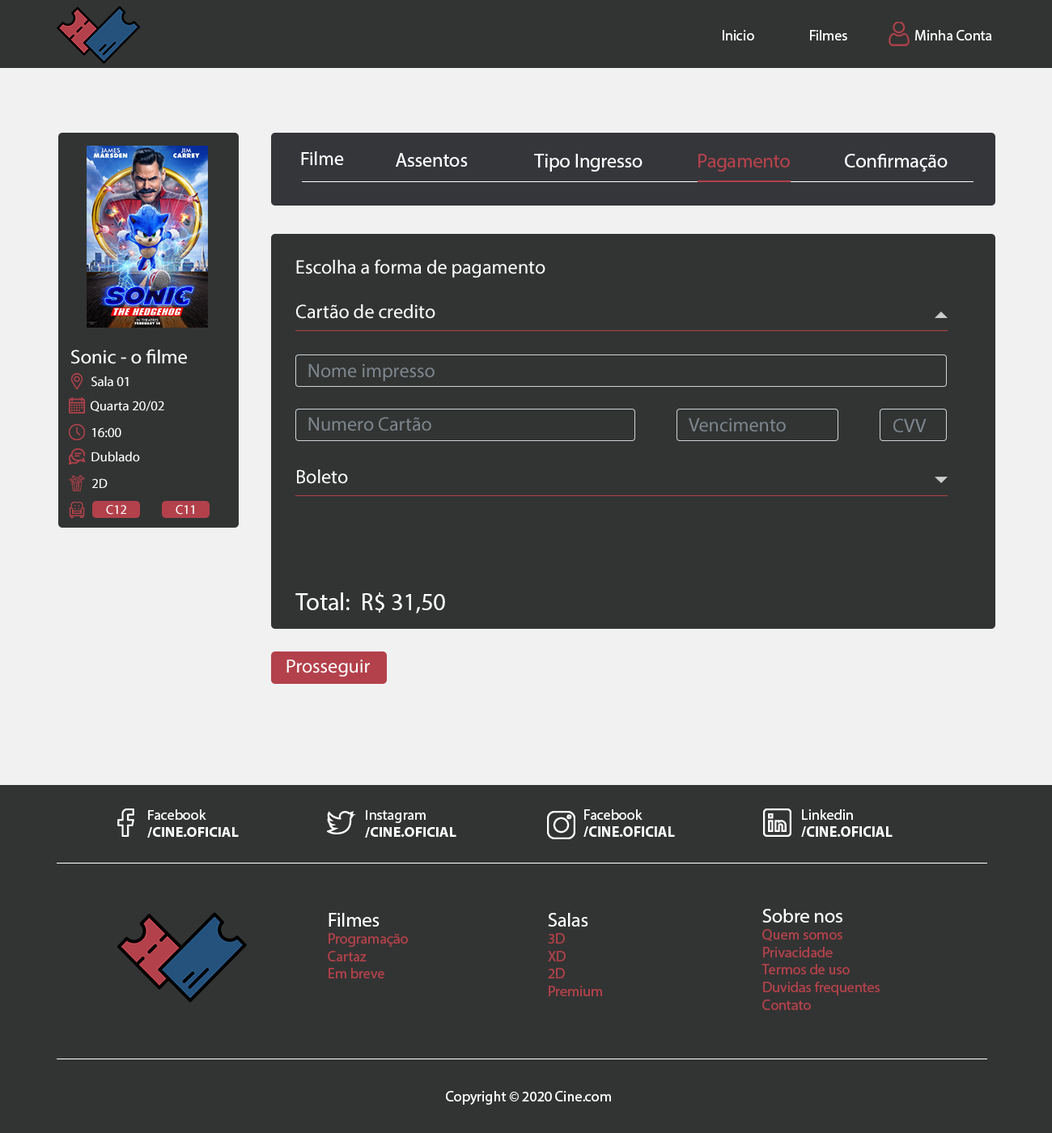
<style>
.page{position:relative;width:1052px;height:1133px;background:#323433}
.page>*{position:absolute;margin:0}
.t1{font:14.6px "MyriadPro-Regular";color:#ffffff}
.t2{font:19.4px "MyriadPro-Regular";color:#ffffff}
.t3{font:19.4px "MyriadPro-Regular";color:#b3414b}
.t4{font:19.4px "MyriadPro-Regular";color:#feffff}
.t5{font:19.4px "MyriadPro-Regular";color:#7d858c}
.t6{font:13.6px "MyriadPro-Regular";color:#ffffff}
.t7{font:13px "MyriadPro-Regular";color:#ffffff}
.t8{font:24.3px "MyriadPro-Regular";color:#ffffff}
.t9{font:14.4px "MyriadPro-Bold";color:#ffffff}
.t10{font:14.4px "MyriadPro-Regular";color:#ffffff}
.t11{font:14.6px "MyriadPro-Bold";color:#ffffff}
.t12{font:14.6px "MyriadPro-Regular";color:#b3414b}
</style>
<div class="page">
<p class="t1" style="left:723px;top:30px;width:269px;height:10px">Inicio  Filmes        Minha Conta</p>
<p class="t2" style="left:301px;top:151px;width:43px;height:14px">Filme</p>
<p class="t2" style="left:396px;top:153px;width:72px;height:14px">Assentos</p>
<p class="t2" style="left:534px;top:154px;width:109px;height:18px">Tipo Ingresso</p>
<p class="t3" style="left:699px;top:154px;width:91px;height:18px">Pagamento</p>
<p class="t2" style="left:845px;top:154px;width:103px;height:18px">Confirmação</p>
<p class="t2" style="left:296px;top:259px;width:250px;height:19px">Escolha a forma de pagamento</p>
<p class="t4" style="left:296px;top:304px;width:139px;height:15px">Cartão de credito</p>
<p class="t2" style="left:71px;top:349px;width:116px;height:15px">Sonic - o filme</p>
<p class="t5" style="left:308px;top:363px;width:127px;height:18px">Nome impresso</p>
<p class="t6" style="left:91px;top:376px;width:38px;height:11px">Sala 01</p>
<p class="t6" style="left:91px;top:401px;width:73px;height:11px">Quarta 20/02</p>
<p class="t5" style="left:308px;top:417px;width:123px;height:14px">Numero Cartão</p>
<p class="t5" style="left:689px;top:418px;width:97px;height:14px">Vencimento</p>
<p class="t5" style="left:894px;top:418px;width:33px;height:15px">CVV</p>
<p class="t6" style="left:92px;top:427px;width:29px;height:11px">16:00</p>
<p class="t6" style="left:91px;top:452px;width:49px;height:10px">Dublado</p>
<p class="t4" style="left:297px;top:469px;width:51px;height:15px">Boleto</p>
<p class="t6" style="left:92px;top:478px;width:16px;height:10px">2D</p>
<p class="t7" style="left:106px;top:505px;width:20px;height:10px">C12</p>
<p class="t7" style="left:176px;top:505px;width:18px;height:10px">C11</p>
<p class="t8" style="left:295px;top:593px;width:150px;height:21px">Total:  R$ 31,50</p>
<p class="t2" style="left:287px;top:660px;width:83px;height:17px">Prosseguir</p>
<p class="t9" style="left:147px;top:809px;width:92px;height:29px"><span class="t10">Facebook<br></span>/CINE.OFICIAL</p>
<p class="t11" style="left:584px;top:809px;width:91px;height:28px"><span class="t1">Facebook<br></span>/CINE.OFICIAL</p>
<p class="t11" style="left:801px;top:809px;width:92px;height:28px"><span class="t1">Linkedin<br></span>/CINE.OFICIAL</p>
<p class="t9" style="left:365px;top:810px;width:92px;height:28px"><span class="t10">Instagram<br></span>/CINE.OFICIAL</p>
<p class="t12" style="left:328px;top:913px;width:80px;height:66px"><span class="t2">Filmes<br></span>Programação<br>Cartaz<br>Em breve</p>
<p class="t12" style="left:548px;top:913px;width:54px;height:83px"><span class="t2">Salas<br></span>3D<br>XD<br>2D<br>Premium</p>
<p class="t12" style="left:762px;top:909px;width:118px;height:101px"><span class="t2">Sobre nos<br></span>Quem somos<br>Privacidade<br>Termos de uso<br>Duvidas frequentes<br>Contato</p>
<p class="t1" style="left:446px;top:1091px;width:165px;height:14px">Copyright © 2020 Cine.com</p>
</div>
